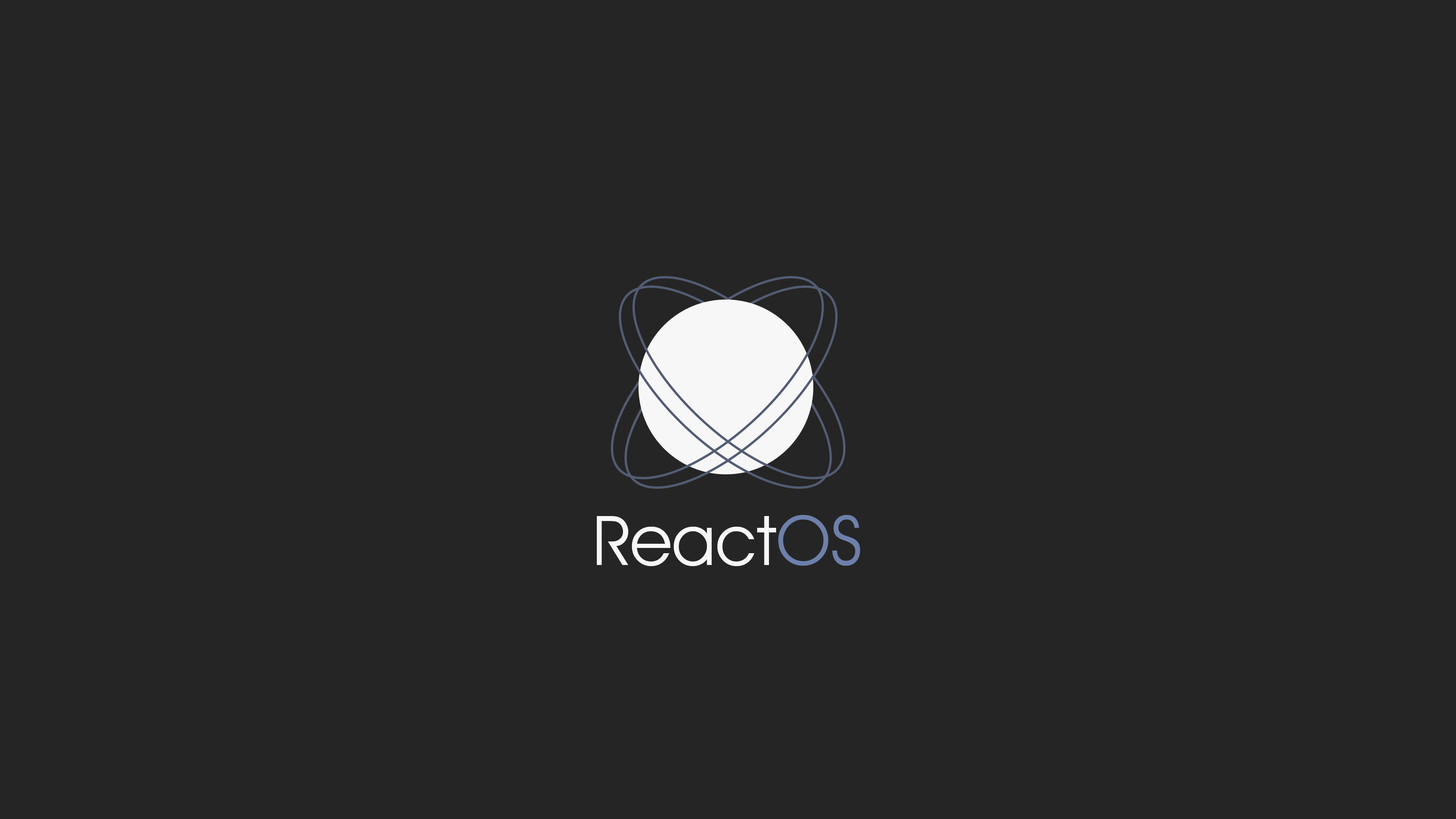
<style>
.page{position:relative;width:1456px;height:819px;background:#252525}
.page>*{position:absolute;margin:0}
.t1{font:69px "AvantGardeITCbyBT-Book";color:#f7f7f7}
.t2{font:69px "AvantGardeITCbyBT-Book";color:#6d80ab}
</style>
<div class="page">
<p class="t1" style="left:597px;top:515px;width:263px;height:51px">React<span class="t2">OS</span></p>
</div>
